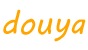
<style>
.page{position:relative;width:88px;height:50px;background:#ffffff}
.page>*{position:absolute;margin:0}
.t1{font:31.7px "MVBoli";color:#ffa500}
</style>
<div class="page">
<p class="t1" style="left:3px;top:9px;width:83px;height:33px">douya</p>
</div>
